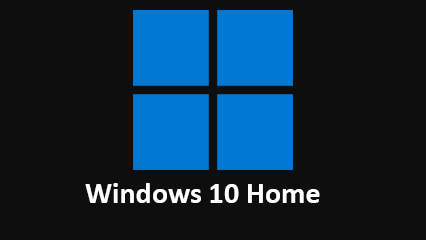
<style>
.page{position:relative;width:426px;height:240px;background:#0e0e0e}
.page>*{position:absolute;margin:0}
.t1{font:30px "Calibri-Bold";color:#ffffff}
</style>
<div class="page">
<p class="t1" style="left:85px;top:183px;width:235px;height:20px">Windows 10 Home</p>
</div>
